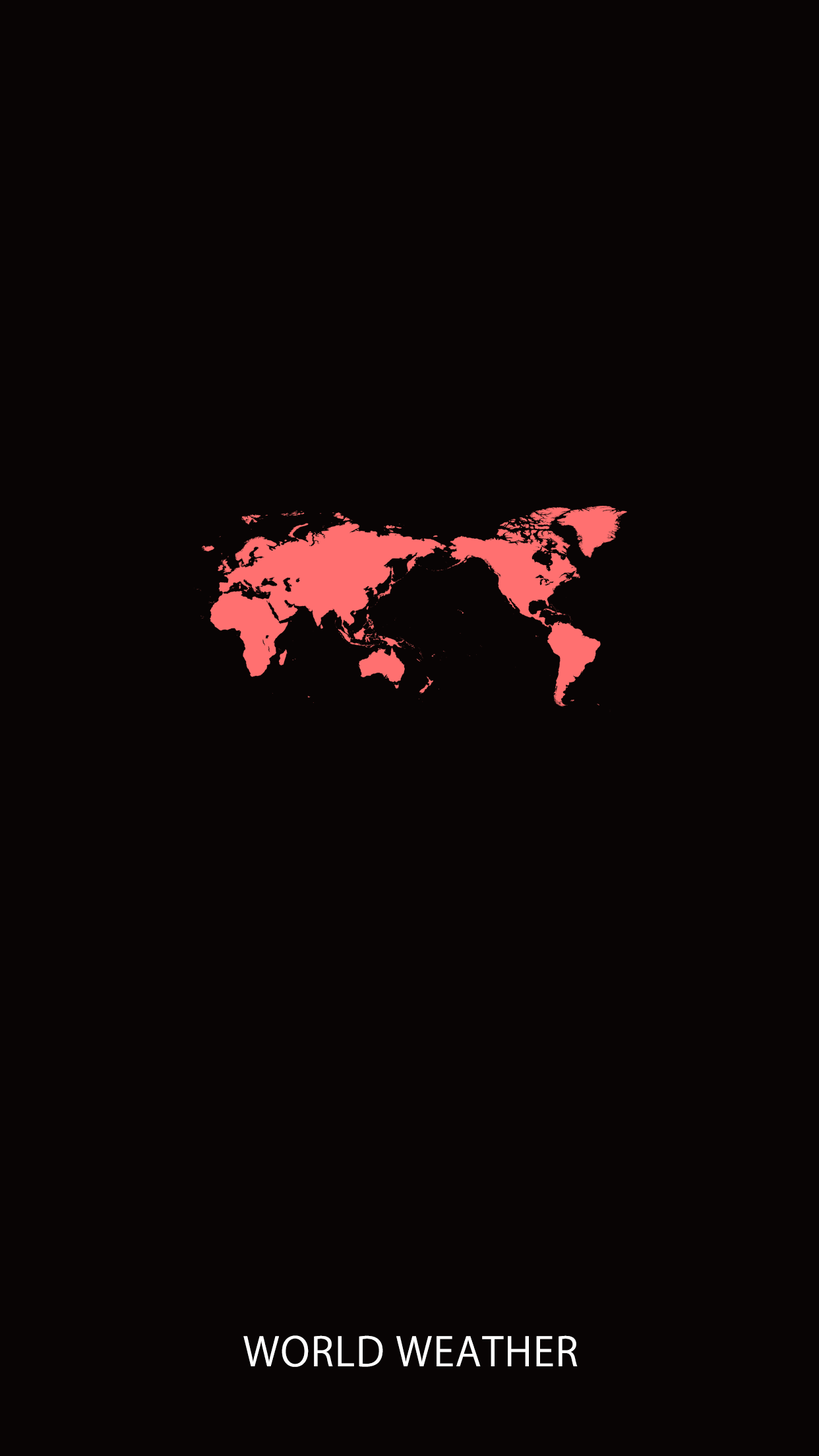
<style>
.page{position:relative;width:819px;height:1456px;background:#080404}
.page>*{position:absolute;margin:0}
.t1{font:39.6px "KozGoPr6N-Regular";letter-spacing:0.03em;color:#ffffff;text-transform:uppercase}
</style>
<div class="page">
<p class="t1" style="left:243px;top:1335px;width:335px;height:32px">world weather</p>
</div>
